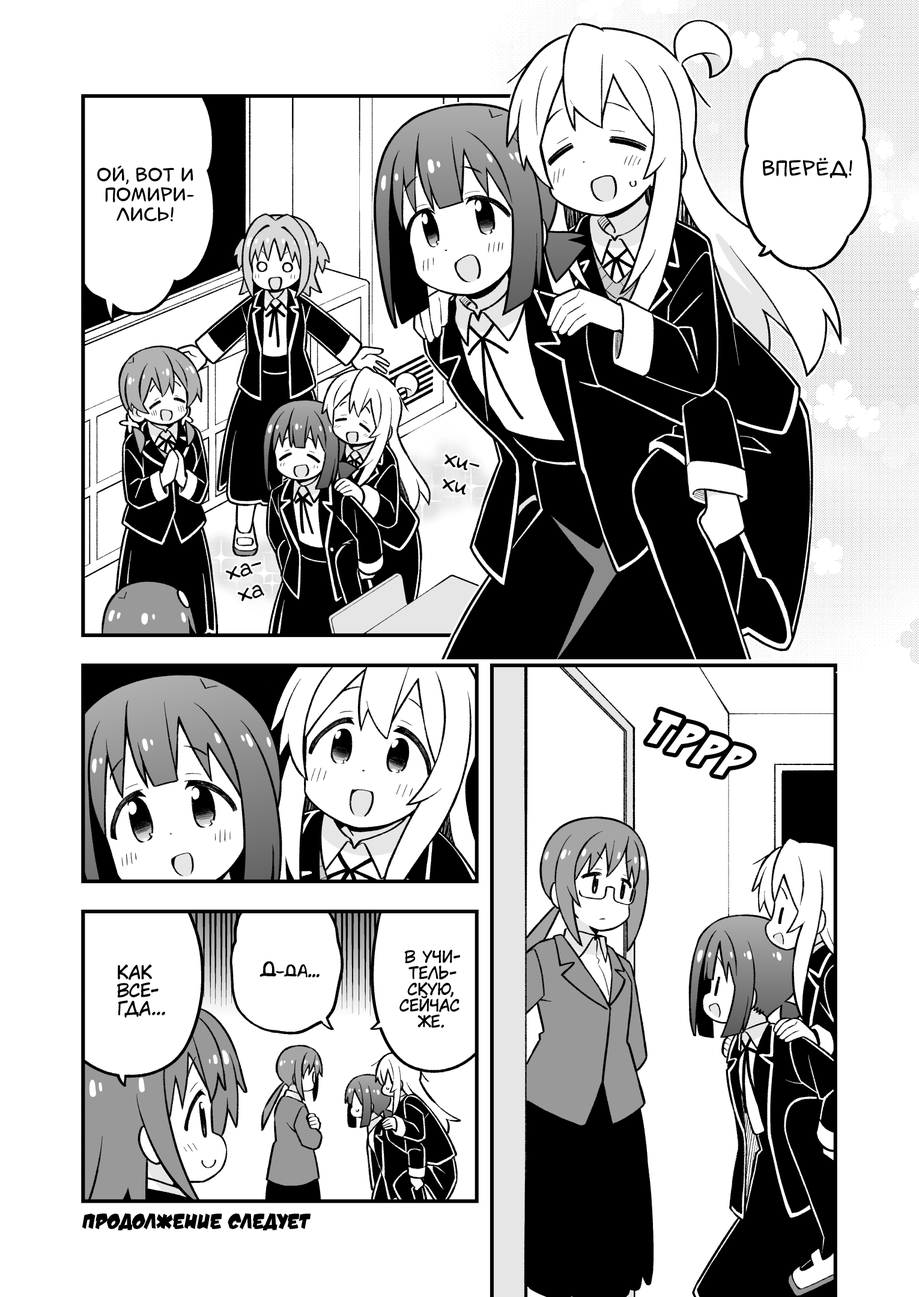
<style>
.page{position:relative;width:919px;height:1297px;background:#ffffff}
.page>*{position:absolute;margin:0}
.t1{font:21.6px "laCartoonerie";color:#000000;text-transform:uppercase}
.t2{font:19.8px "laCartoonerie";color:#000000;text-transform:uppercase}
.t3{font:24px "v_Augie";color:#000000}
.t4{font:16.2px "KuraiVoice2";color:#000000;text-transform:uppercase}
.t5{font:18px "KuraiVoice2";color:#000000;text-transform:uppercase}
.t6{font:18px "AkbarPlain";color:#000000}
.t7{font:21.6px "v_DamnNoisyKids";color:#000000;text-transform:uppercase}
</style>
<div class="page">
<p class="t1" style="left:763px;top:157px;width:89px;height:21px">Вперёд!</p>
<p class="t2" style="left:97px;top:166px;width:97px;height:56px;text-align:center">Ой, вот и<br>помири-<br>лись!</p>
<p class="t3" style="left:442px;top:454px;width:37px;height:41px;text-align:center;rotate:17deg">хи-<br>хи</p>
<p class="t3" style="left:226px;top:562px;width:38px;height:39px;text-align:center;rotate:-16deg">ха-<br>ха</p>
<p class="t4" style="left:399px;top:950px;width:61px;height:78px;text-align:center">В учи-<br>тель-<br>скую,<br>сейчас<br>же.</p>
<p class="t5" style="left:117px;top:965px;width:48px;height:53px;text-align:center">Как<br>все-<br>гда...</p>
<p class="t6" style="left:259px;top:962px;width:61px;height:16px">Д-да...</p>
<p class="t7" style="left:82px;top:1213px;width:229px;height:18px">Продолжение следует</p>
</div>
